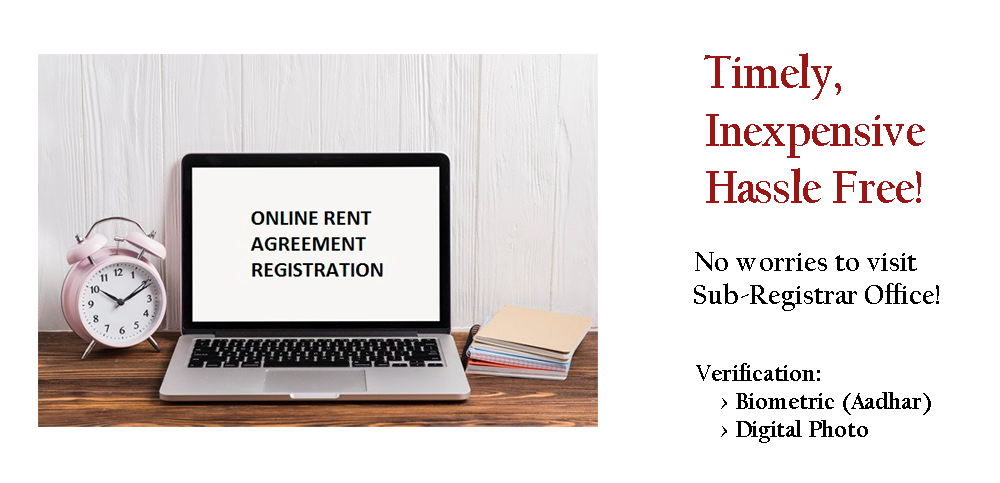
<style>
.page{position:relative;width:1000px;height:483px;background:#ffffff}
.page>*{position:absolute;margin:0}
.t1{font:48px "CalifornianFB-Bold";color:#9b1515;scale:0.91 1}
.t2{font:27.5px "CalifornianFB-Bold";color:#000000}
.t3{font:23.6px "CalifornianFB-Bold";color:#000000}
</style>
<div class="page">
<p class="t1" style="left:704px;top:53px;width:221px;height:150px">Timely, <br>Inexpensive <br>Hassle Free!</p>
<p class="t2" style="left:694px;top:252px;width:245px;height:59px">No worries to visit<br>Sub-Registrar Office!</p>
<p class="t3" style="left:696px;top:363px;width:235px;height:80px">Verification:<br>    &gt; Biometric (Aadhar)<br>    &gt; Digital Photo</p>
</div>
